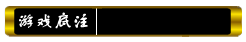
<style>
.page{position:relative;width:246px;height:42px;background:#000000}
.page>*{position:absolute;margin:0}
.t1{font:18px "FZSTK--GBK1-0";color:#ffffff;font-weight:bold}
</style>
<div class="page">
<p class="t1" style="left:19px;top:12px;width:69px;height:17px">游戏底注</p>
</div>
